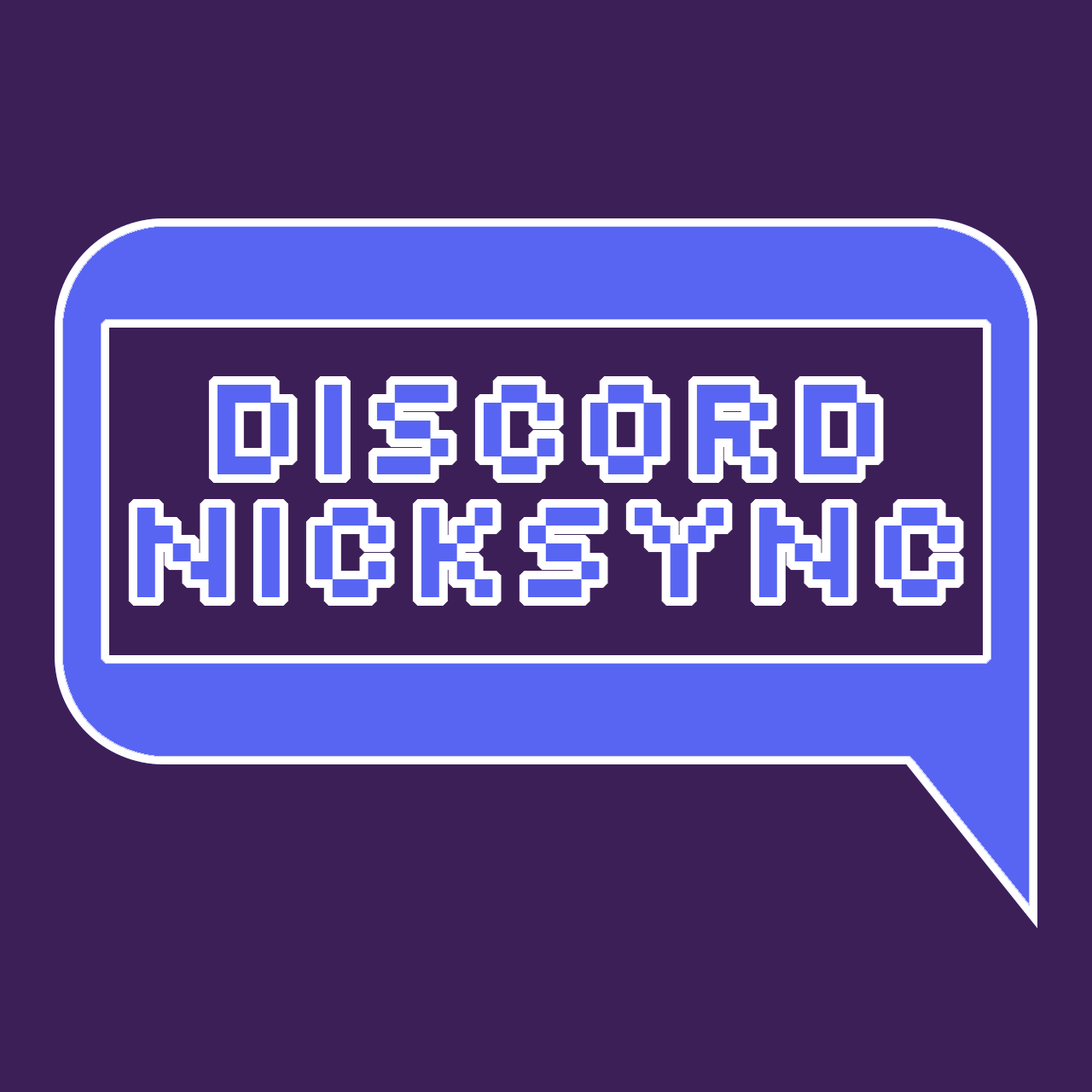
<style>
.page{position:relative;width:1092px;height:1092px;background:#3d1f58}
.page>*{position:absolute;margin:0}
.t1{font:142.2px "Silkscreen-Regular";color:#5865f2}
</style>
<div class="page">
<p class="t1" style="left:136px;top:385px;width:819px;height:212px;text-align:center">Discord<br>NickSync</p>
</div>
